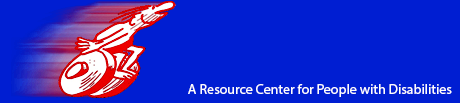
<style>
.page{position:relative;width:460px;height:103px;background:#001ed2}
.page>*{position:absolute;margin:0}
.t1{font:14px "MyriadPro-Regular";color:#fefefe}
</style>
<div class="page">
<p class="t1" style="left:188px;top:84px;width:264px;height:13px">A Resource Center for People with Disabilities</p>
</div>
